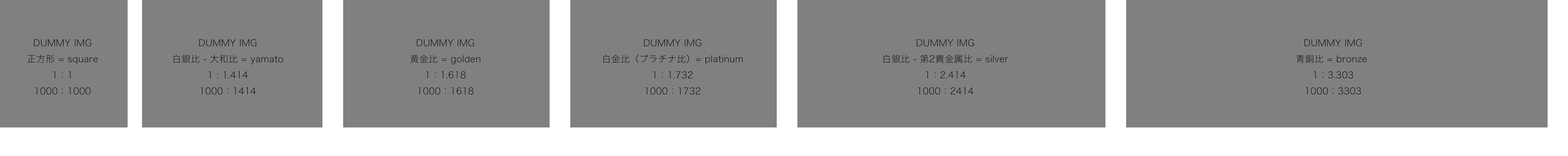
<style>
.page{position:relative;width:1568px;height:156px;background:#808080}
.page>*{position:absolute;margin:0}
.t1{font:9.2px "HiraginoSans-W1";letter-spacing:0.02em;color:#000000}
</style>
<div class="page">
<p class="t1" style="left:27px;top:39px;width:71px;height:56px;text-align:center">DUMMY IMG<br>正方形 = square<br>1：1<br>1000：1000</p>
<p class="t1" style="left:174px;top:39px;width:109px;height:56px;text-align:center">DUMMY IMG<br>白銀比 - 大和比 = yamato<br>1 : 1.414<br>1000：1414</p>
<p class="t1" style="left:410px;top:39px;width:70px;height:56px;text-align:center">DUMMY IMG<br>黄金比 = golden<br>1：1.618<br>1000：1618</p>
<p class="t1" style="left:603px;top:39px;width:140px;height:56px;text-align:center">DUMMY IMG<br>白金比（プラチナ比）= platinum<br>1：1.732<br>1000：1732</p>
<p class="t1" style="left:884px;top:39px;width:124px;height:56px;text-align:center">DUMMY IMG<br>白銀比 - 第2貴金属比 = silver<br>1：2.414<br>1000：2414</p>
<p class="t1" style="left:1296px;top:39px;width:71px;height:56px;text-align:center">DUMMY IMG<br>青銅比 = bronze <br>1：3.303<br>1000：3303</p>
</div>
